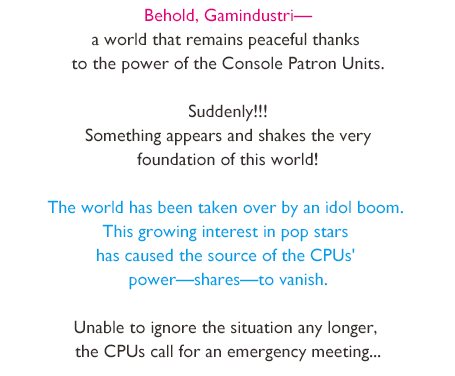
<style>
.page{position:relative;width:455px;height:376px;background:#ffffff}
.page>*{position:absolute;margin:0}
.t1{font:18px/24px "GillSansMT";color:#362e2b}
.t2{font:18px/24px "GillSansMT";color:#e4007f}
.t3{font:18px/24px "GillSansMT";color:#00a0e9}
</style>
<div class="page">
<p class="t1" style="left:47px;top:8px;width:356px;height:354px;text-align:center"><span class="t2">Behold, Gamindustri—<br></span>a world that remains peaceful thanks <br>to the power of the Console Patron Units.<br><br>Suddenly!!!<br>Something appears and shakes the very<br>foundation of this world!<br><br><span class="t3">The world has been taken over by an idol boom. <br>This growing interest in pop stars <br>has caused the source of the CPUs' <br>power—shares—to vanish.<br></span><br>Unable to ignore the situation any longer, <br>the CPUs call for an emergency meeting...</p>
</div>
